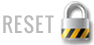
<style>
.page{position:relative;width:94px;height:45px;background:#ffffff}
.page>*{position:absolute;margin:0}
.t1{font:20px "Oswald";letter-spacing:0.03em;color:#bbbbbb}
</style>
<div class="page">
<p class="t1" style="left:3px;top:15px;width:51px;height:19px">RESET</p>
</div>
